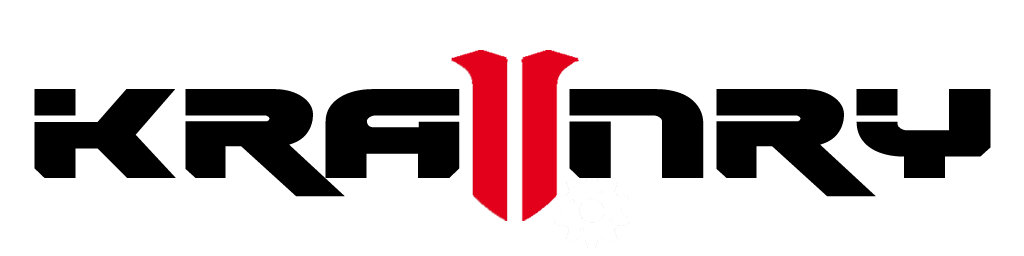
<style>
.page{position:relative;width:1024px;height:256px;background:#ffffff}
.page>*{position:absolute;margin:0}
.t1{font:140px "Renegado";letter-spacing:0.01em;color:#000000;scale:1.28 1}
</style>
<div class="page">
<p class="t1" style="left:34px;top:89px;width:957px;height:108px">KRA NRY</p>
</div>
